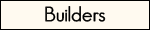
<style>
.page{position:relative;width:150px;height:30px;background:#fffaf0}
.page>*{position:absolute;margin:0}
.t1{font:20px "GeosansLight";color:#000000;font-weight:bold}
</style>
<div class="page">
<p class="t1" style="left:45px;top:6px;width:61px;height:16px">Builders</p>
</div>
